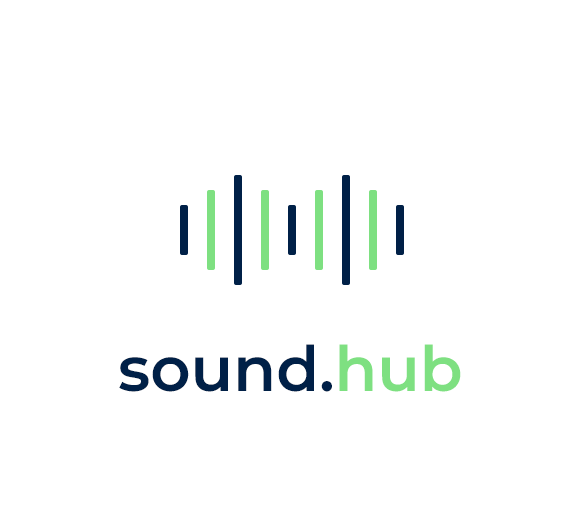
<style>
.page{position:relative;width:584px;height:509px;background:#ffffff}
.page>*{position:absolute;margin:0}
.t1{font:62.5px "Montserrat-SemiBold";color:#002047}
.t2{font:62.5px "Montserrat-SemiBold";color:#7ee081}
</style>
<div class="page">
<p class="t1" style="left:119px;top:344px;width:342px;height:48px">sound.<span class="t2">hub</span></p>
</div>
